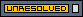
<style>
.page{position:relative;width:83px;height:17px;background:#536c88}
.page>*{position:absolute;margin:0}
.t1{font:8px "BitDustTwo";color:#000000}
</style>
<div class="page">
<p class="t1" style="left:7px;top:6px;width:59px;height:5px">UNRESOLVED</p>
</div>
